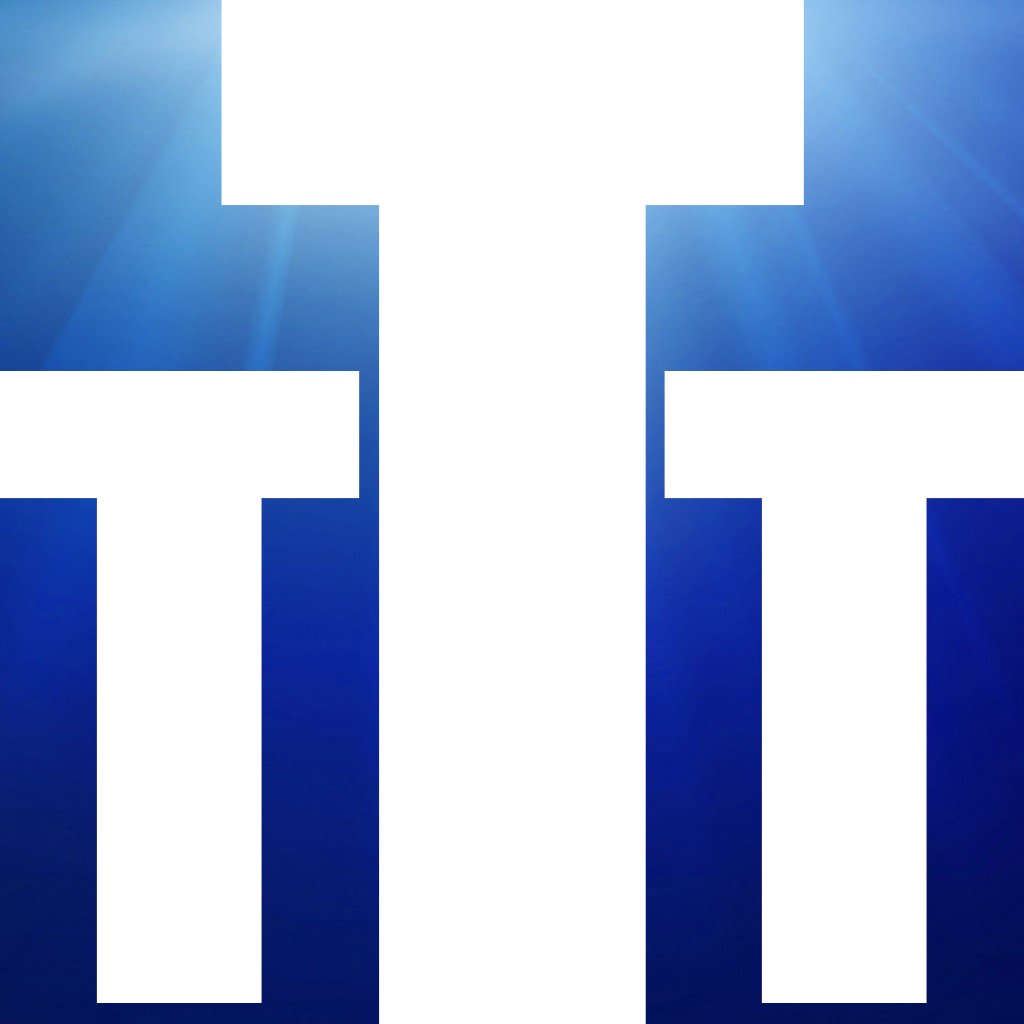
<style>
.page{position:relative;width:1024px;height:1024px;background:#ffffff}
.page>*{position:absolute;margin:0}
.t1{font:1296px "Impact";color:#ffffff}
.t2{font:800px "Impact";color:#ffffff}
</style>
<div class="page">
<p class="t1" style="left:221px;top:0px;width:583px;height:1025px">T</p>
<p class="t2" style="left:0px;top:371px;width:360px;height:632px">T</p>
<p class="t2" style="left:664px;top:371px;width:361px;height:632px">T</p>
</div>
